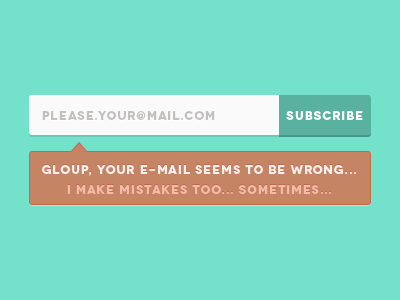
<style>
.page{position:relative;width:400px;height:300px;background:#74e1cb}
.page>*{position:absolute;margin:0}
.t1{font:12px "Novecentowide-Bold";letter-spacing:0.09em;color:#c3bfbf;text-transform:uppercase}
.t2{font:12px "Novecentowide-Bold";letter-spacing:0.09em;color:#ffffff;text-transform:uppercase}
.t3{font:12px "Novecentowide-Bold";letter-spacing:0.09em;color:#fdf0ec;text-transform:uppercase}
.t4{font:12px "Novecentowide-Bold";letter-spacing:0.09em;color:#f6bba8;text-transform:uppercase}
</style>
<div class="page">
<p class="t1" style="left:42px;top:111px;width:173px;height:9px">please.your@mail.com</p>
<p class="t2" style="left:286px;top:111px;width:77px;height:9px">subscribe</p>
<p class="t3" style="left:42px;top:165px;width:314px;height:11px">GLoup, your e-mail seems to be wrong...</p>
<p class="t4" style="left:67px;top:185px;width:264px;height:9px">I make mistakes too... sometimes...</p>
</div>
